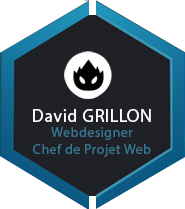
<style>
.page{position:relative;width:185px;height:209px;background:#202126}
.page>*{position:absolute;margin:0}
.t1{font:18px "MyriadPro-Regular";letter-spacing:0.03em;color:#ffffff}
.t2{font:14px "MyriadPro-Regular";letter-spacing:0.03em;color:#357791}
</style>
<div class="page">
<p class="t1" style="left:33px;top:109px;width:118px;height:13px">David GRILLON</p>
<p class="t2" style="left:33px;top:127px;width:118px;height:30px;text-align:center">Webdesigner<br>Chef de Projet Web</p>
</div>
